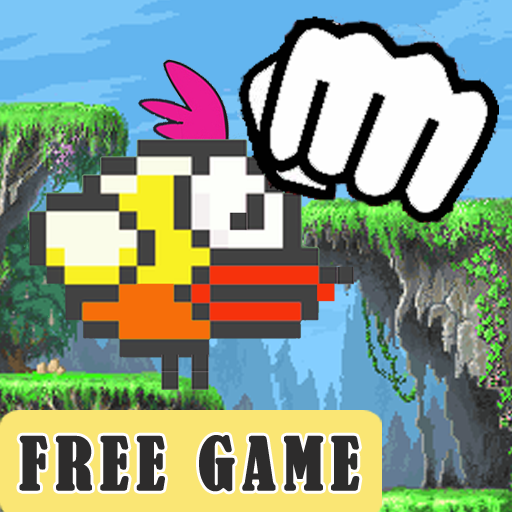
<style>
.page{position:relative;width:512px;height:512px}
.page>*{position:absolute;margin:0}
.t1{font:67px "BernardMT-Condensed";letter-spacing:0.1em;color:#343434;font-weight:bold}
</style>
<div class="page">
<p class="t1" style="left:19px;top:435px;width:341px;height:57px">FREE GAME</p>
</div>
